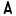
<style>
.page{position:relative;width:16px;height:16px;background:#ffffff}
.page>*{position:absolute;margin:0}
.t1{font:20px "OCRAExtended";color:#000000}
</style>
<div class="page">
<p class="t1" style="left:3px;top:1px;width:9px;height:13px">A</p>
</div>
